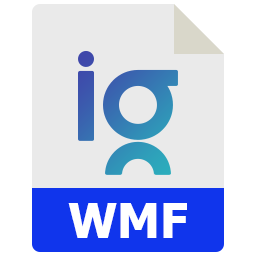
<style>
.page{position:relative;width:256px;height:256px;background:#eaeaea}
.page>*{position:absolute;margin:0}
.t1{font:48px "Tahoma-Bold";color:#ffffff}
</style>
<div class="page">
<p class="t1" style="left:68px;top:203px;width:119px;height:35px">WMF</p>
</div>
